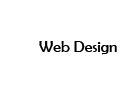
<style>
.page{position:relative;width:126px;height:95px;background:#ffffff}
.page>*{position:absolute;margin:0}
.t1{font:16px "BerlinSansFB-Reg";color:#000000}
</style>
<div class="page">
<p class="t1" style="left:39px;top:41px;width:78px;height:14px">Web Design</p>
</div>
